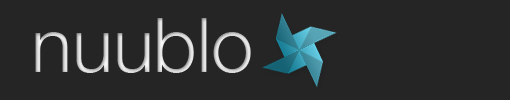
<style>
.page{position:relative;width:510px;height:100px;background:#252525}
.page>*{position:absolute;margin:0}
.t1{font:76px "HelveticaNeue-Light"}
</style>
<div class="page">
<p class="t1" style="left:35px;top:18px;width:216px;height:55px">nuublo</p>
</div>
